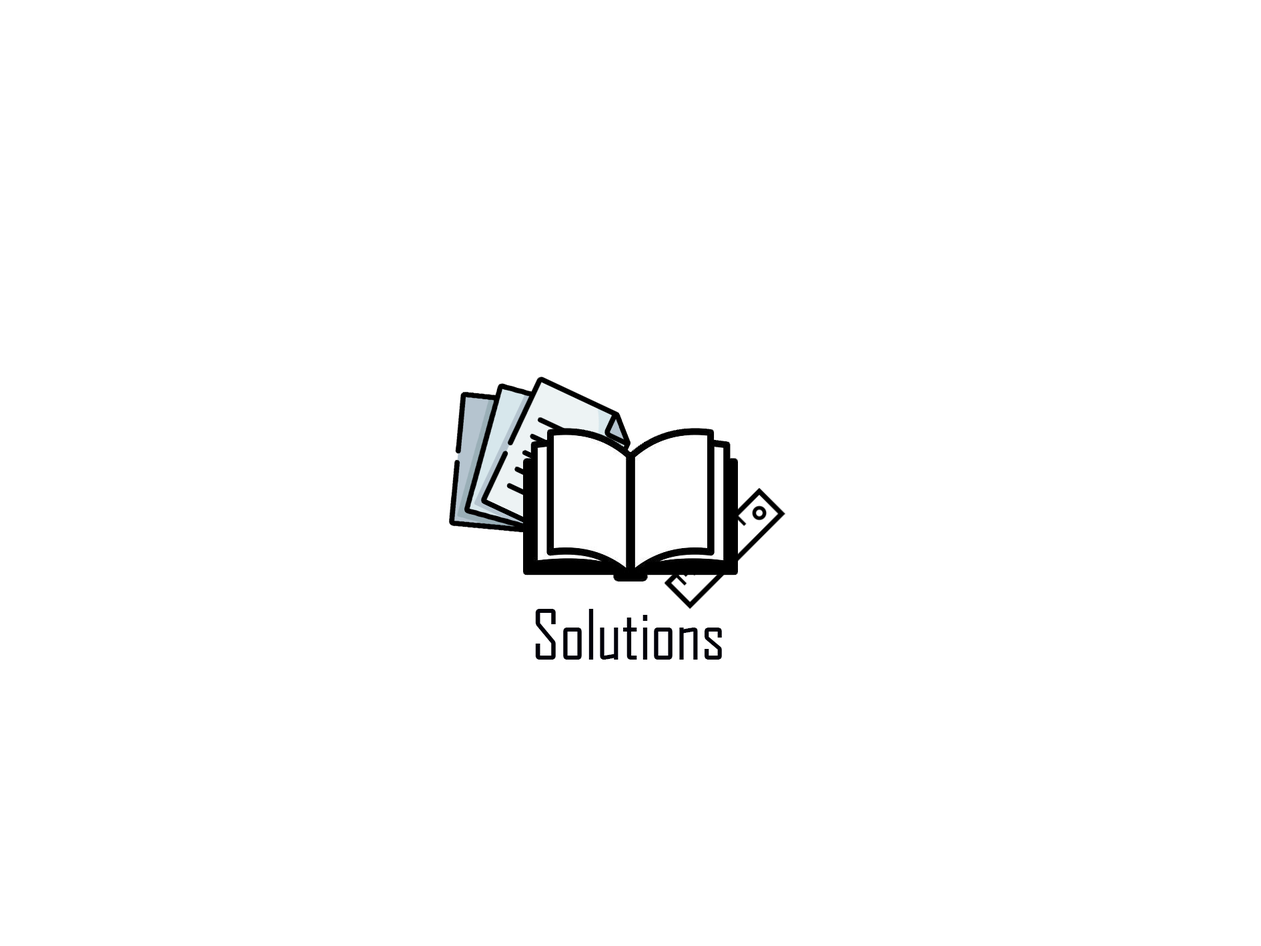
<style>
.page{position:relative;width:1261px;height:946px;background:#ffffff}
.page>*{position:absolute;margin:0}
.t1{font:66.7px "AgencyFB-Reg";color:#00000a}
</style>
<div class="page">
<p class="t1" style="left:535px;top:609px;width:187px;height:50px">Solutions</p>
</div>
